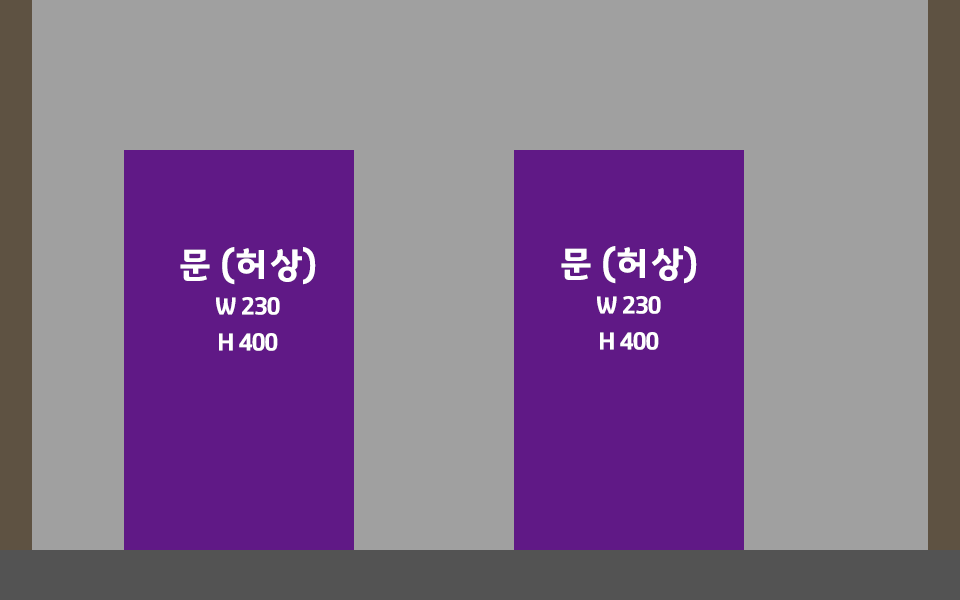
<style>
.page{position:relative;width:960px;height:600px;background:#a0a0a0}
.page>*{position:absolute;margin:0}
.t1{font:24px/36px "GyeonggiTitleV";letter-spacing:-0.05em;color:#ffffff}
.t2{font:36px/12px "GyeonggiTitleV";letter-spacing:-0.05em;color:#ffffff}
</style>
<div class="page">
<p class="t1" style="left:561px;top:246px;width:136px;height:104px;text-align:center"><span class="t2">문 (허상)<br><br><br><br></span>W 230<br>H 400</p>
<p class="t1" style="left:180px;top:247px;width:136px;height:104px;text-align:center"><span class="t2">문 (허상)<br><br><br><br></span>W 230<br>H 400</p>
</div>
